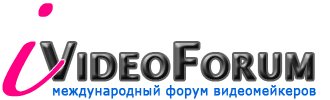
<style>
.page{position:relative;width:330px;height:100px;background:#ffffff}
.page>*{position:absolute;margin:0}
.t1{font:100px "Zapfino";letter-spacing:0.05em;color:#ff0084;font-weight:bold}
.t2{font:48px "LucidaGrande-Bold";letter-spacing:0.05em;font-variant:small-caps;font-weight:bold}
.t3{font:48px "LucidaGrande-Bold";letter-spacing:0.01em;font-variant:small-caps;font-weight:bold}
.t4{font:48px "LucidaGrande-Bold";letter-spacing:0.025em;font-variant:small-caps;font-weight:bold}
.t5{font:13px "Verdana";color:#0063dc;font-weight:bold;scale:0.95 1}
</style>
<div class="page">
<p class="t1" style="left:2px;top:3px;width:63px;height:94px">i</p>
<p class="t2" style="left:41px;top:43px;width:272px;height:37px"><span class="t3">Vi</span>deo<span class="t4">F</span>orum</p>
<p class="t5" style="left:53px;top:85px;width:263px;height:14px">международный форум видеомейкеров</p>
</div>
